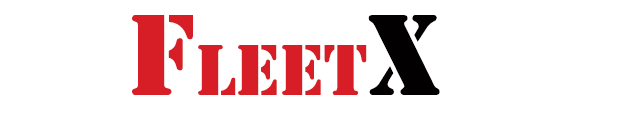
<style>
.page{position:relative;width:640px;height:122px;background:#ffffff}
.page>*{position:absolute;margin:0}
.t1{font:75px "Stencil";color:#d71e26}
.t2{font:120px "Stencil";color:#d71e26}
.t3{font:120px "Stencil";color:#020000}
</style>
<div class="page">
<p class="t1" style="left:132px;top:15px;width:308px;height:80px"><span class="t2">F</span>LEET<span class="t3">X</span></p>
</div>
